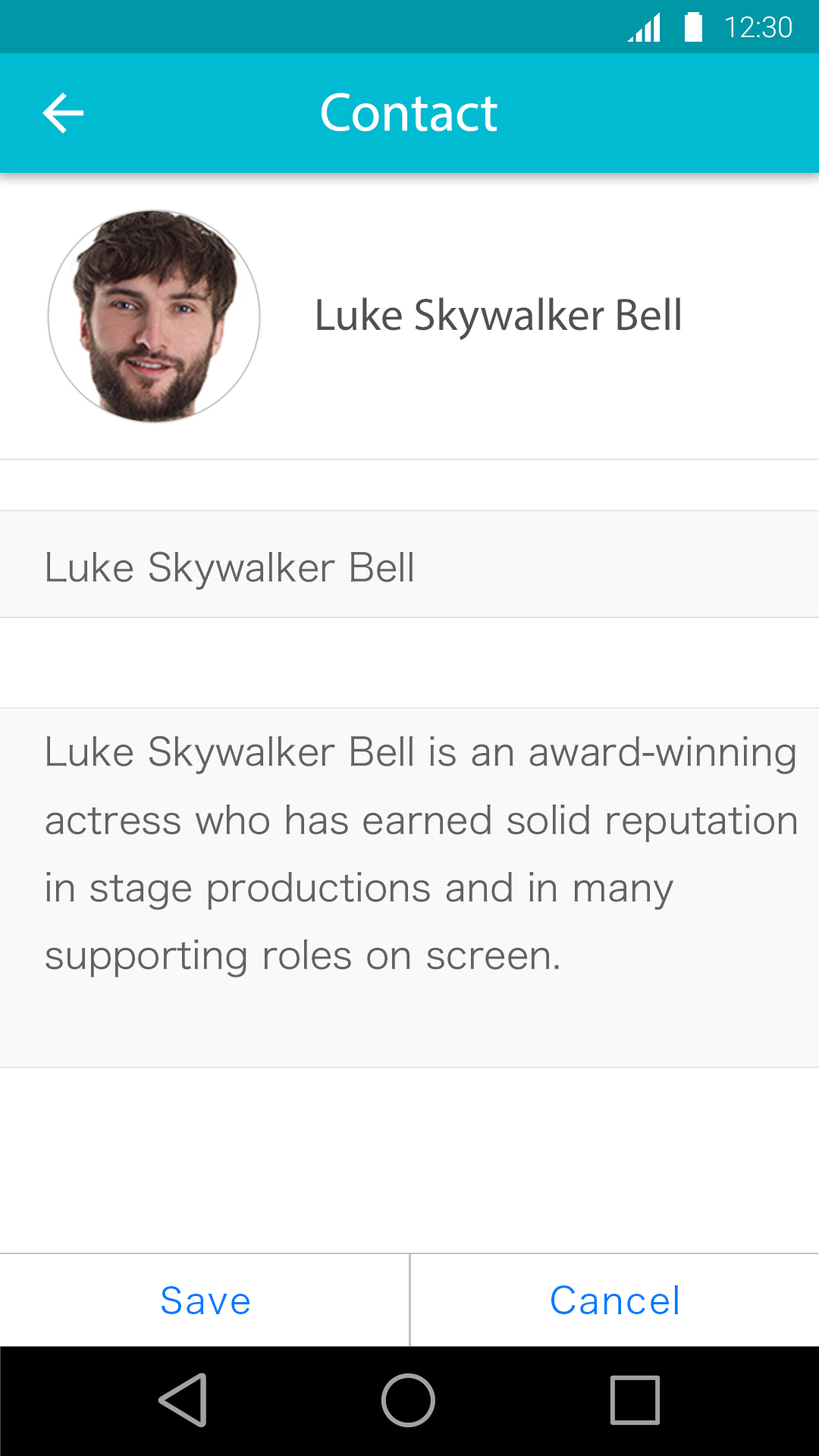
<style>
.page{position:relative;width:819px;height:1456px;background:#ffffff}
.page>*{position:absolute;margin:0}
.t1{font:28.8px "Roboto-Light";color:#ffffff}
.t2{font:54.6px "MyriadPro-Regular";color:#ffffff}
.t3{font:45.5px "MyriadPro-Regular";color:#505050}
.t4{font:38.7px "HiraKakuProN-W3";color:#626262}
.t5{font:36.3px "HiraKakuProN-W3";letter-spacing:0.05em;color:#007aff}
.t6{font:36.4px "HiraKakuProN-W3";letter-spacing:0.05em;color:#007aff}
</style>
<div class="page">
<p class="t1" style="left:726px;top:16px;width:66px;height:22px">12:30</p>
<p class="t2" style="left:322px;top:93px;width:175px;height:38px">Contact</p>
<p class="t3" style="left:317px;top:297px;width:363px;height:43px">Luke Skywalker Bell</p>
<p class="t4" style="left:46px;top:551px;width:367px;height:39px">Luke Skywalker Bell</p>
<p class="t4" style="left:45px;top:736px;width:752px;height:241px">Luke Skywalker Bell is an award-winning<br>actress who has earned solid reputation<br>in stage productions and in many <br>supporting roles on screen.</p>
<p class="t5" style="left:161px;top:1286px;width:88px;height:28px">Save</p>
<p class="t6" style="left:551px;top:1285px;width:127px;height:29px">Cancel</p>
</div>
